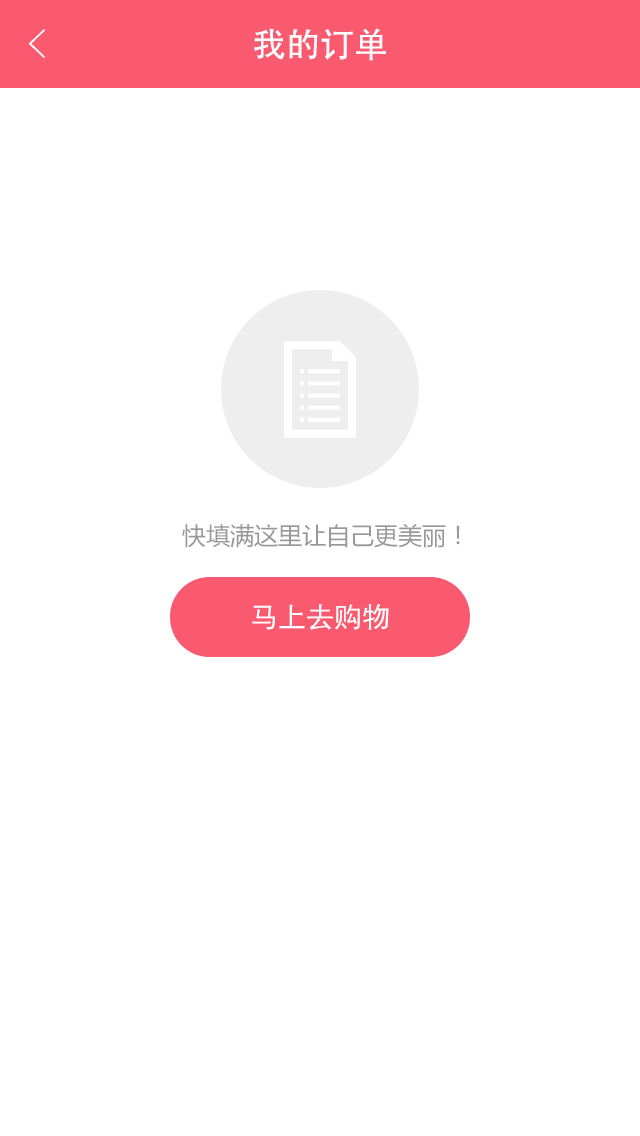
<style>
.page{position:relative;width:640px;height:1136px;background:#ffffff}
.page>*{position:absolute;margin:0}
.t1{font:40px "FZYXJW--GB1-0";color:#ffffff}
.t2{font:34px "AdobeHeitiStd-Regular";color:#ffffff}
.t3{font:24px "MicrosoftYaHei";color:#999999}
.t4{font:28px "SimHei";color:#ffffff}
</style>
<div class="page">
<p class="t1" style="left:28px;top:29px;width:17px;height:29px">&lt;</p>
<p class="t2" style="left:254px;top:28px;width:132px;height:33px">我的订单</p>
<p class="t3" style="left:182px;top:523px;width:278px;height:25px">快填满这里让自己更美丽！</p>
<p class="t4" style="left:252px;top:604px;width:137px;height:26px">马上去购物</p>
</div>
